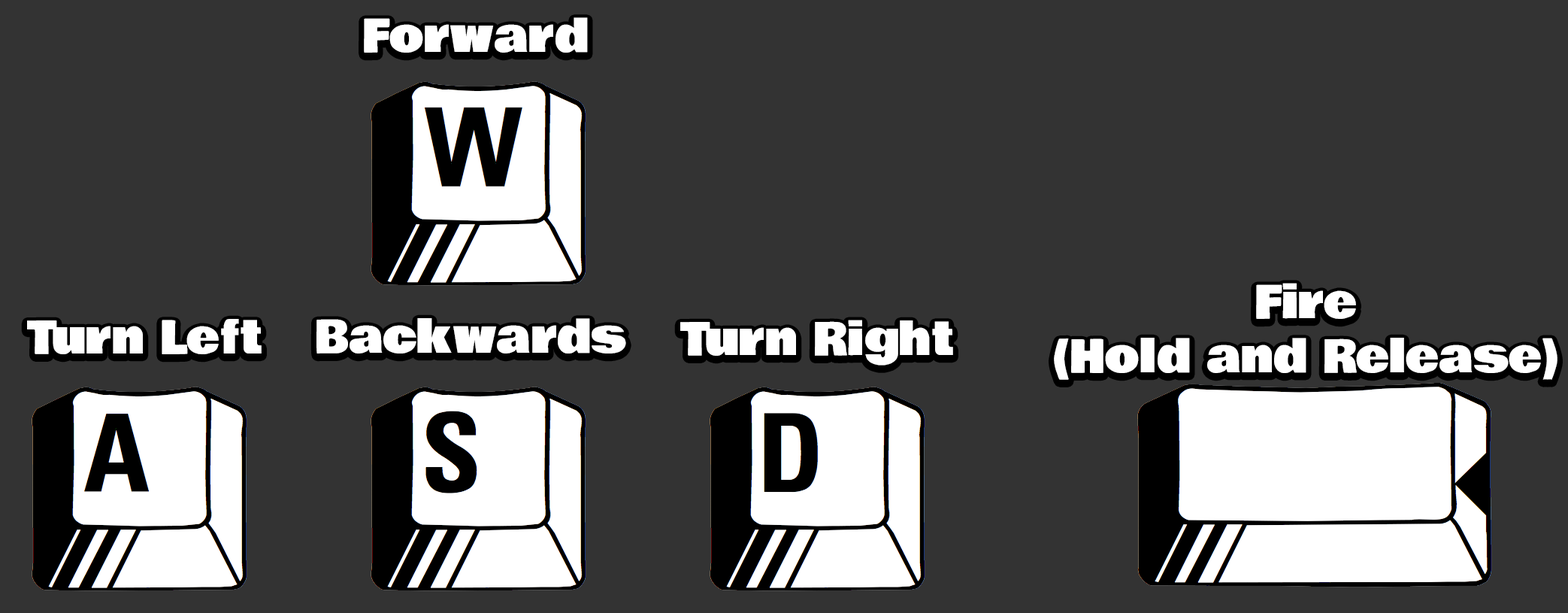
<style>
.page{position:relative;width:1568px;height:613px;background:#333333}
.page>*{position:absolute;margin:0}
.t1{font:45.1px "BowlbyOne";color:#ffffff}
</style>
<div class="page">
<p class="t1" style="left:364px;top:17px;width:224px;height:36px">Forward</p>
<p class="t1" style="left:1054px;top:283px;width:503px;height:97px;text-align:center">Fire<br>(Hold and Release)</p>
<p class="t1" style="left:316px;top:318px;width:310px;height:35px">Backwards</p>
<p class="t1" style="left:27px;top:319px;width:235px;height:35px">Turn Left</p>
<p class="t1" style="left:680px;top:319px;width:273px;height:46px">Turn Right</p>
</div>
